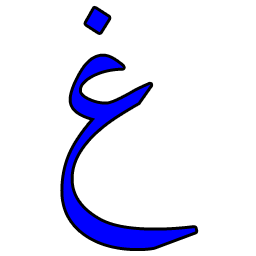
<style>
.page{position:relative;width:256px;height:256px;background:#ffffff}
.page>*{position:absolute;margin:0}
.t1{font:275px "TraditionalArabic";color:#0000ff}
</style>
<div class="page">
<p class="t1" style="left:63px;top:8px;width:133px;height:240px">غ</p>
</div>
